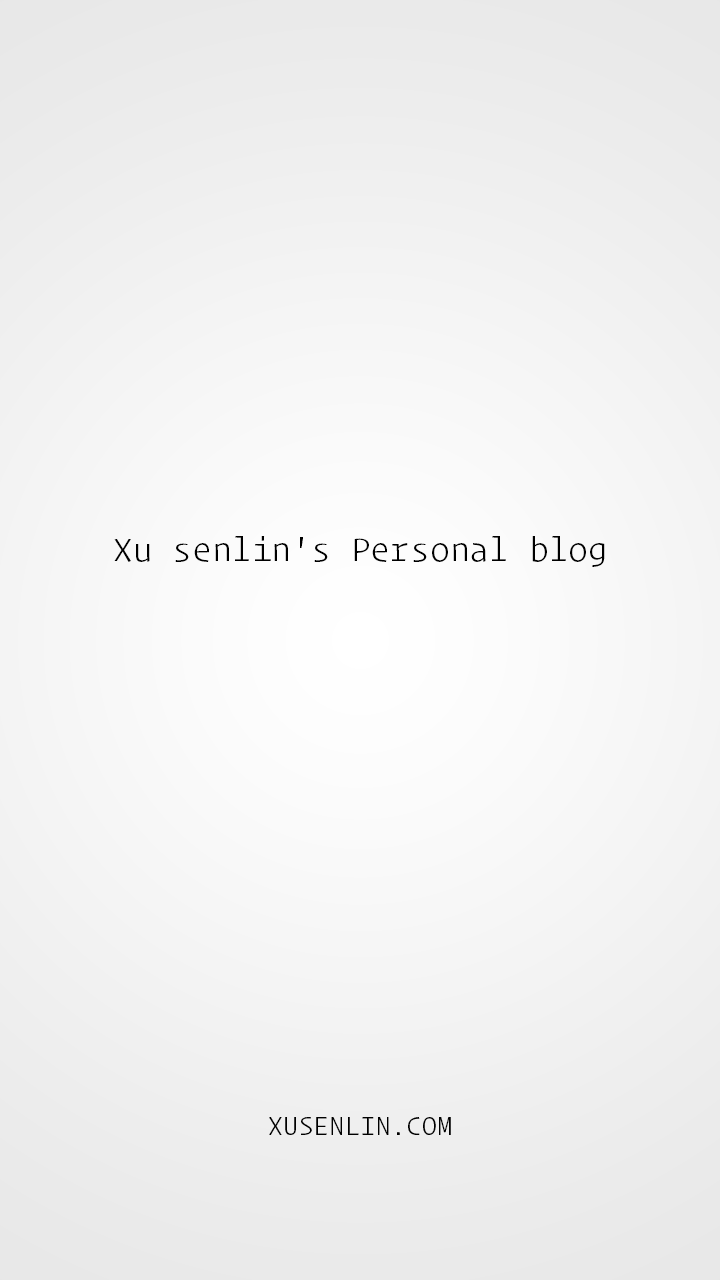
<style>
.page{position:relative;width:720px;height:1280px}
.page>*{position:absolute;margin:0}
.t1{font:36px "OperatorMono-Light";color:#000000}
.t2{font:28px "OperatorMono-Light";color:#000000}
</style>
<div class="page">
<p class="t1" style="left:114px;top:536px;width:491px;height:31px">Xu senlin's Personal blog</p>
<p class="t2" style="left:269px;top:1117px;width:182px;height:18px">XUSENLIN.COM</p>
</div>
